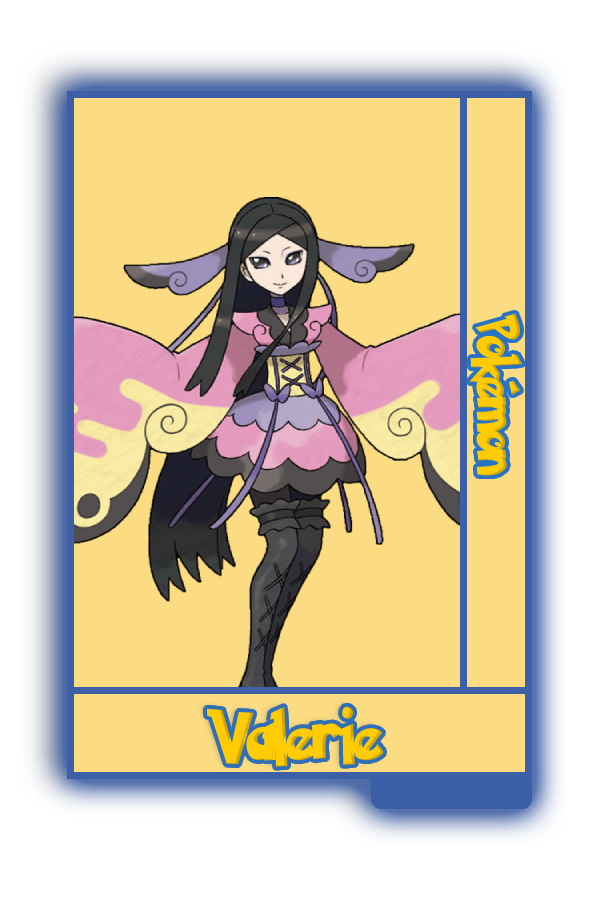
<style>
.page{position:relative;width:600px;height:900px;background:#fbdc83}
.page>*{position:absolute;margin:0}
.t1{font:48.8px "PokemonSolidNormal";color:#ffcb05;scale:0.8 1}
.t2{font:56.6px "PokemonSolidNormal";color:#ffcb05;scale:0.92 1}
</style>
<div class="page">
<p class="t1" style="left:469px;top:313px;width:54px;height:163px;rotate:90deg">Pokémon</p>
<p class="t2" style="left:206px;top:706px;width:178px;height:61px">Valerie</p>
</div>
